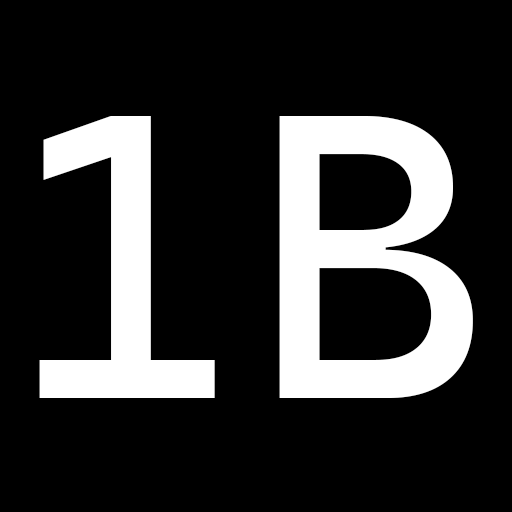
<style>
.page{position:relative;width:512px;height:512px;background:#000000}
.page>*{position:absolute;margin:0}
.t1{font:406px "CascadiaMono-Roman";letter-spacing:0.01em;color:#ffffff}
</style>
<div class="page">
<p class="t1" style="left:39px;top:116px;width:434px;height:282px">1B</p>
</div>
